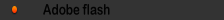
<style>
.page{position:relative;width:224px;height:20px;background:#333333}
.page>*{position:absolute;margin:0}
.t1{font:14.9px "ArialRoundedMTBold";color:#030303;scale:0.78 1}
</style>
<div class="page">
<p class="t1" style="left:43px;top:4px;width:67px;height:11px">Adobe flash</p>
</div>
